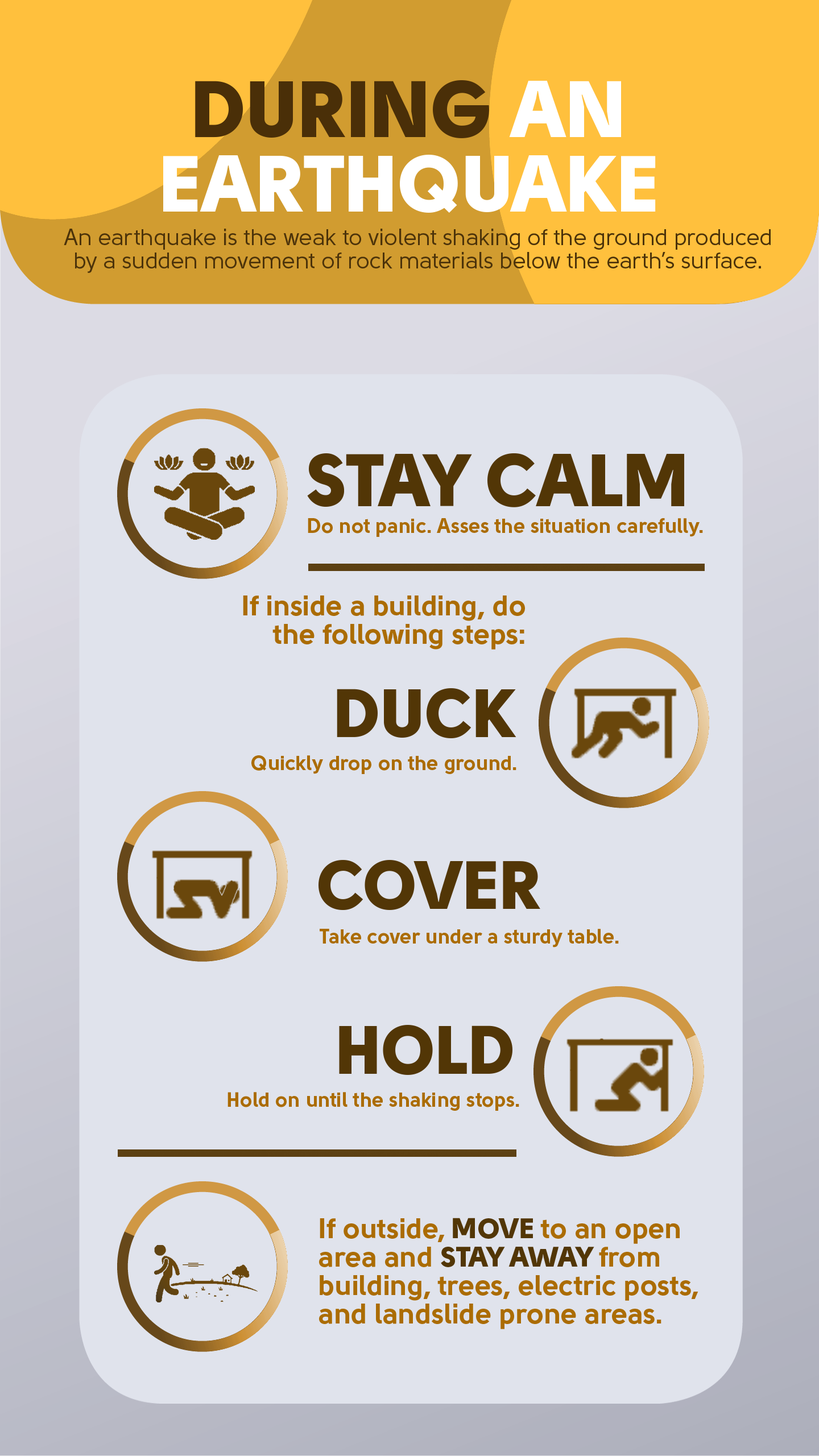
<style>
.page{position:relative;width:819px;height:1456px;background:#e0e3ec}
.page>*{position:absolute;margin:0}
.t1{font:79.6px/74.5px "Solomon-Sans-Black";color:#ffffff}
.t2{font:79.6px/74.5px "Solomon-Sans-Black";color:#4a2f08}
.t3{font:22.7px/23.3px "Solomon-Sans-Normal";color:#4c330a}
.t4{font:73.9px "Solomon-Sans-Black";color:#523606}
.t5{font:20.5px "Solomon-Sans-Bold";color:#ab6c03}
.t6{font:28.4px/28.4px "Solomon-Sans-Bold";color:#ab6c03}
.t7{font:68.2px "Solomon-Sans-Black";color:#523606}
.t8{font:28.4px/28.4px "Solomon-Sans-Black";color:#523606}
</style>
<div class="page">
<p class="t1" style="left:163px;top:80px;width:493px;height:133px;text-align:center"><span class="t2">DURING</span> AN<br>EARTHQUAKE</p>
<p class="t3" style="left:64px;top:229px;width:707px;height:44px;text-align:center">An earthquake is the weak to violent shaking of the ground produced<br>by a sudden movement of rock materials below the earth’s surface.</p>
<p class="t4" style="left:307px;top:453px;width:377px;height:54px">STAY CALM</p>
<p class="t5" style="left:308px;top:518px;width:395px;height:19px">Do not panic. Asses the situation carefully.</p>
<p class="t6" style="left:243px;top:595px;width:282px;height:55px;text-align:right">If inside a building, do<br>the following steps:</p>
<p class="t7" style="left:337px;top:688px;width:179px;height:50px">DUCK</p>
<p class="t5" style="left:251px;top:755px;width:265px;height:19px">Quickly drop on the ground.</p>
<p class="t7" style="left:318px;top:860px;width:222px;height:50px">COVER</p>
<p class="t5" style="left:320px;top:929px;width:299px;height:19px">Take cover under a sturdy table.</p>
<p class="t7" style="left:339px;top:1025px;width:173px;height:50px">HOLD</p>
<p class="t5" style="left:227px;top:1092px;width:292px;height:19px">Hold on until the shaking stops.</p>
<p class="t6" style="left:319px;top:1218px;width:379px;height:111px">If outside, <span class="t8">MOVE </span>to an open<br>area and <span class="t8">STAY AWAY </span>from<br>building, trees, electric posts,<br>and landslide prone areas.</p>
</div>
